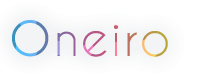
<style>
.page{position:relative;width:197px;height:78px;background:#ffffff}
.page>*{position:absolute;margin:0}
.t1{font:48px "CaviarDreams";letter-spacing:0.05em}
.t2{font:48px "CaviarDreams-Bold";letter-spacing:0.05em}
</style>
<div class="page">
<p class="t1" style="left:12px;top:20px;width:156px;height:37px"><span class="t2">O</span>neiro</p>
</div>
